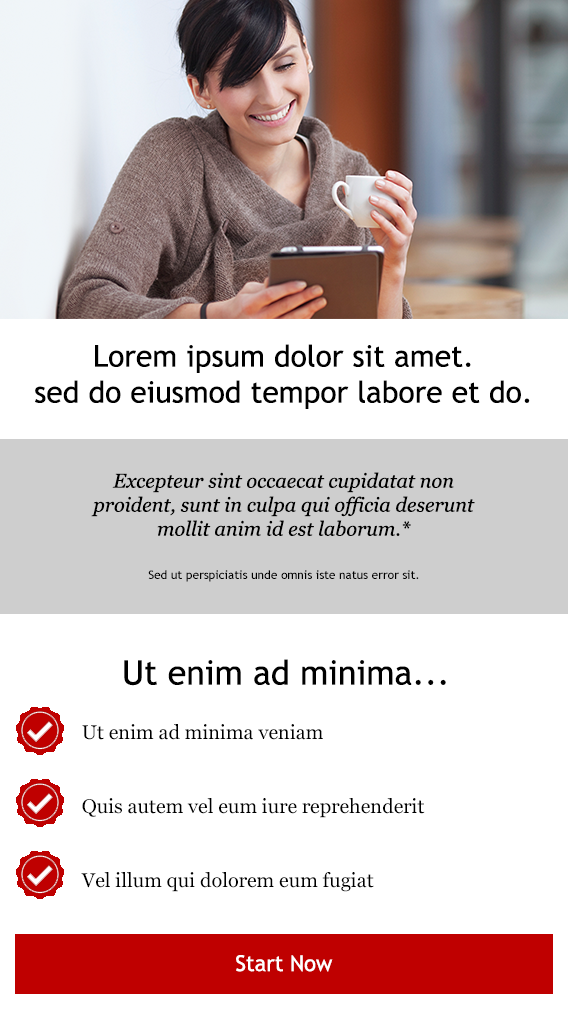
<style>
.page{position:relative;width:568px;height:1025px;background:#ffffff}
.page>*{position:absolute;margin:0}
.t1{font:30px "TrebuchetMS";color:#000000}
.t2{font:20px "Georgia-Italic";color:#000000}
.t3{font:12px "TrebuchetMS";color:#000000}
.t4{font:34px "TrebuchetMS";color:#000000}
.t5{font:20px "Georgia";color:#000000}
.t6{font:22px "TrebuchetMS";color:#ffffff}
</style>
<div class="page">
<p class="t1" style="left:35px;top:344px;width:495px;height:65px;text-align:center">Lorem ipsum dolor sit amet.<br>sed do eiusmod tempor labore et do.</p>
<p class="t2" style="left:91px;top:472px;width:384px;height:64px;text-align:center">Excepteur sint occaecat cupidatat non proident, sunt in culpa qui officia deserunt mollit anim id est laborum.*</p>
<p class="t3" style="left:148px;top:570px;width:271px;height:12px">Sed ut perspiciatis unde omnis iste natus error sit.</p>
<p class="t4" style="left:124px;top:659px;width:322px;height:27px">Ut enim ad minima...</p>
<p class="t5" style="left:82px;top:724px;width:241px;height:16px">Ut enim ad minima veniam</p>
<p class="t5" style="left:82px;top:798px;width:343px;height:20px">Quis autem vel eum iure reprehenderit</p>
<p class="t5" style="left:81px;top:872px;width:293px;height:20px">Vel illum qui dolorem eum fugiat</p>
<p class="t6" style="left:236px;top:955px;width:97px;height:17px">Start Now</p>
</div>
